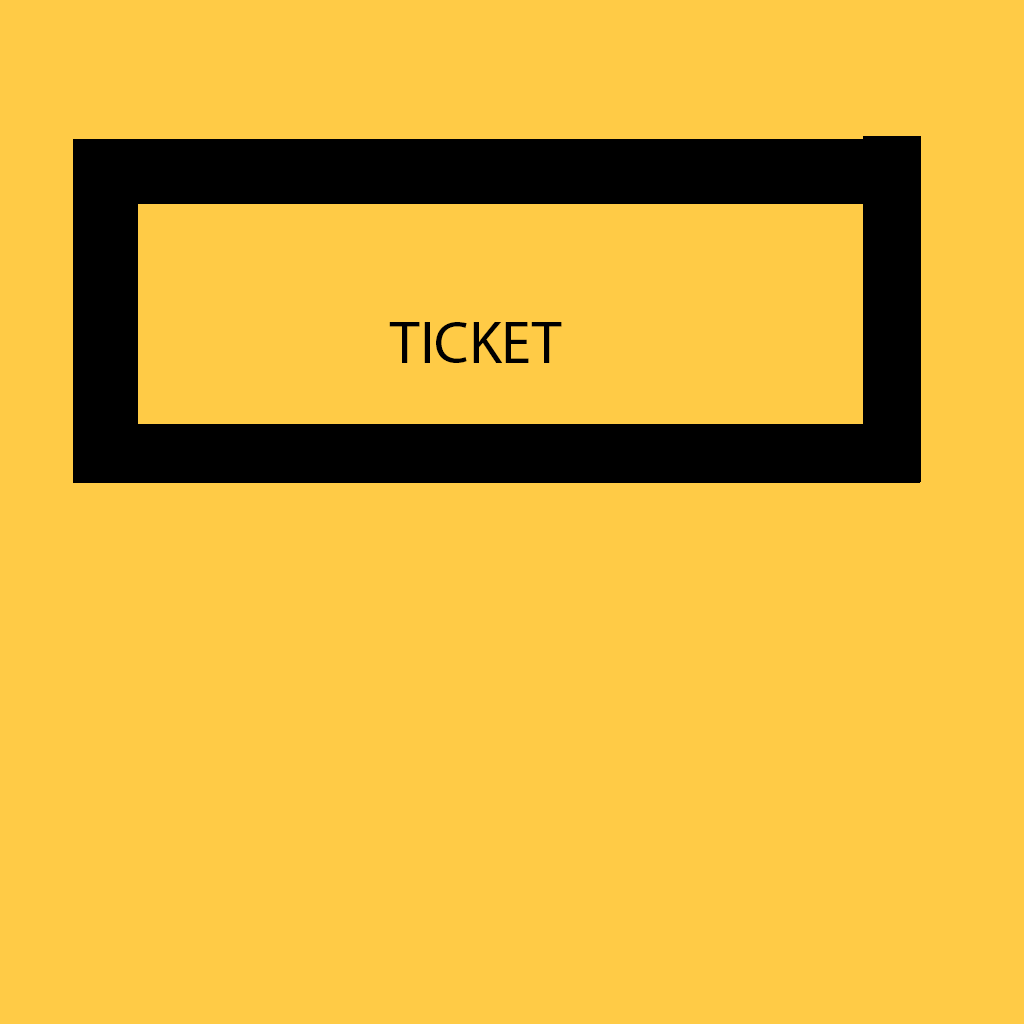
<style>
.page{position:relative;width:1024px;height:1024px;background:#ffcb46}
.page>*{position:absolute;margin:0}
.t1{font:60px "MyriadPro-Regular";color:#000000}
</style>
<div class="page">
<p class="t1" style="left:389px;top:322px;width:173px;height:41px">TICKET</p>
</div>
